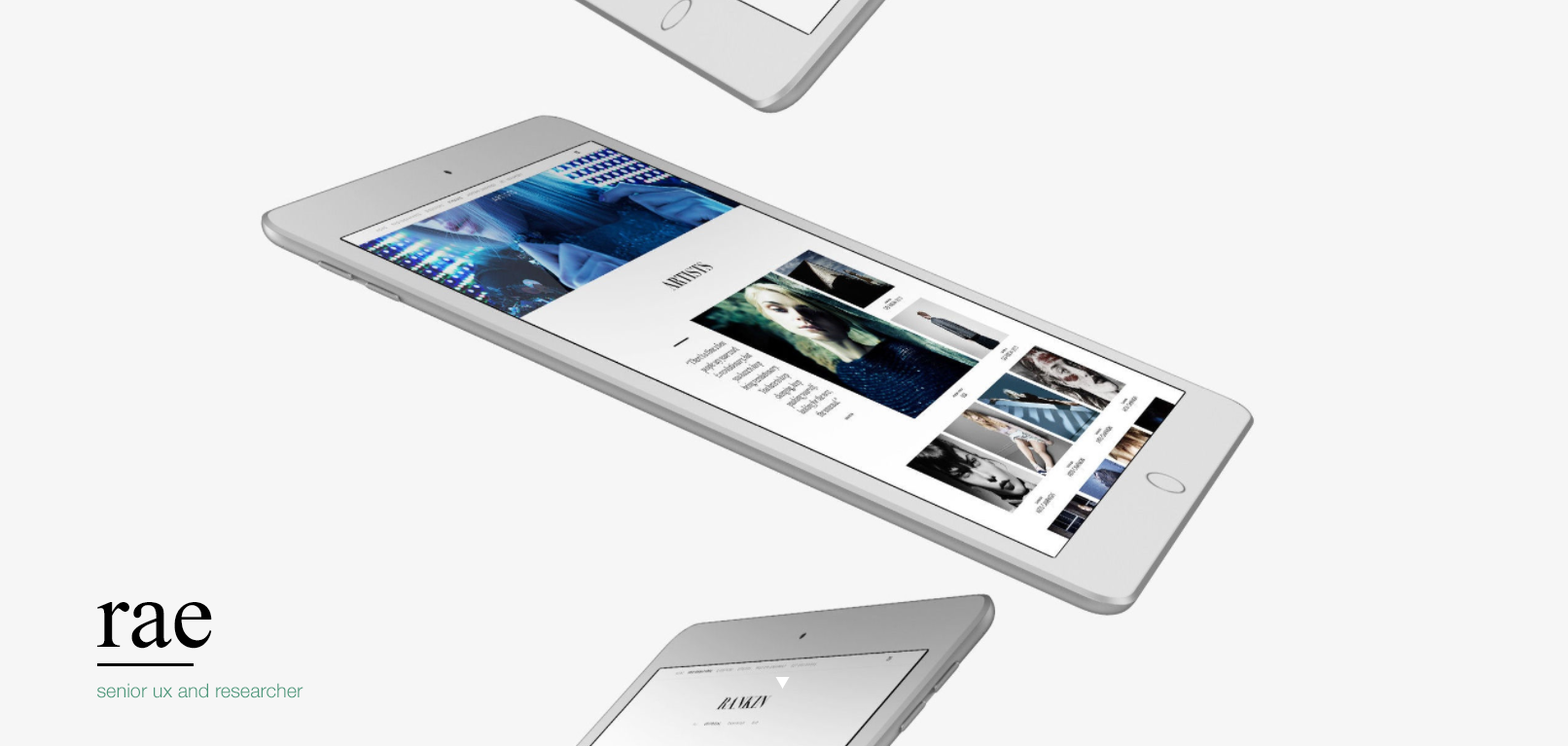
<style>
.page{position:relative;width:1568px;height:746px;background:#f6f6f6}
.page>*{position:absolute;margin:0}
.t1{font:97.3px "TimesNewRomanPSMT";color:#000000}
.t2{font:19.5px "HelveticaNeue-Light";color:#4b977a}
</style>
<div class="page">
<p class="t1" style="left:97px;top:602px;width:115px;height:47px">rae</p>
<p class="t2" style="left:97px;top:683px;width:206px;height:15px">senior ux and researcher</p>
</div>
